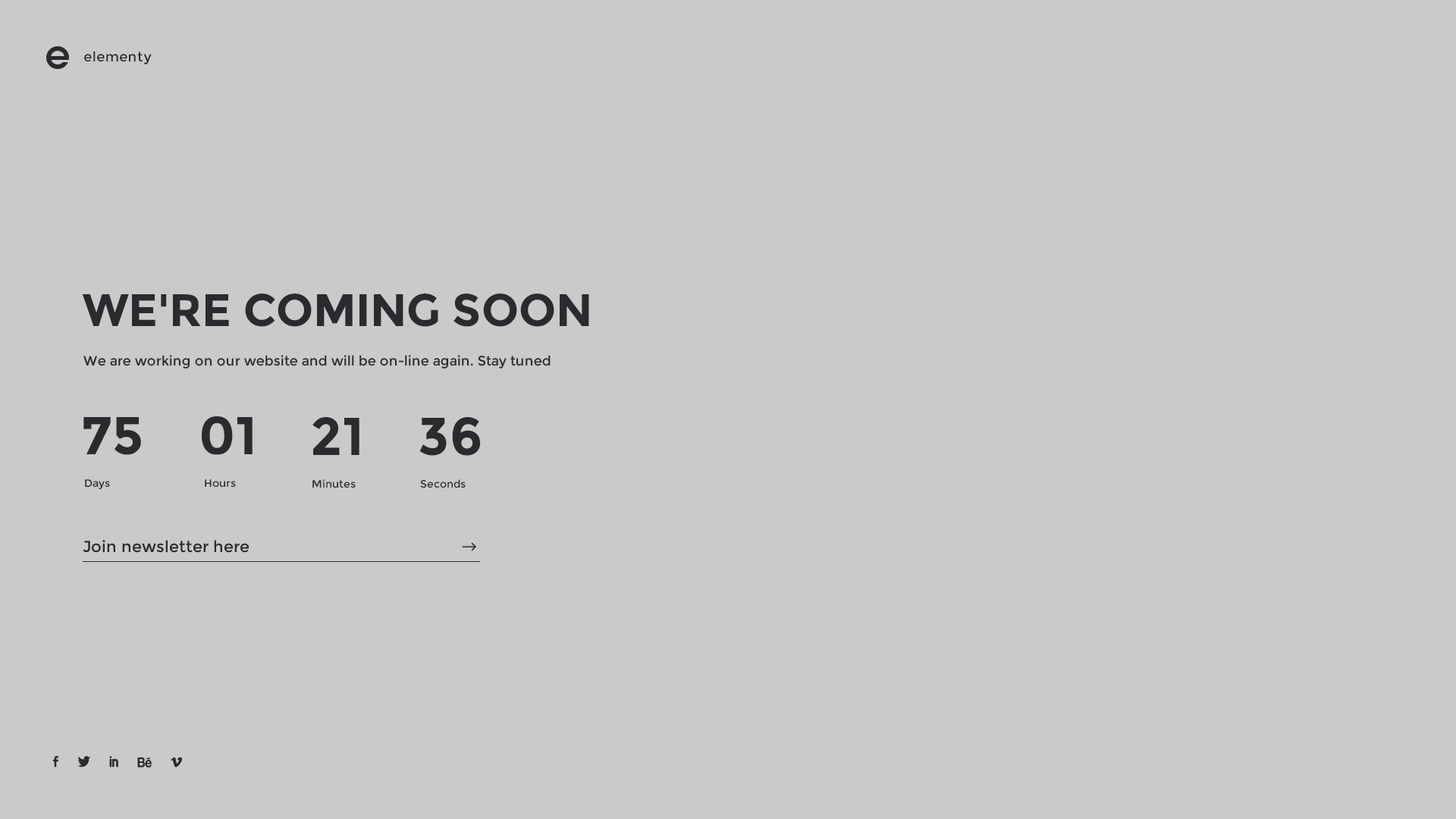
<style>
.page{position:relative;width:1456px;height:819px;background:#cacaca}
.page>*{position:absolute;margin:0}
.t1{font:13.6px "Montserrat-Regular";letter-spacing:0.025em;color:#2f2a2b}
.t2{font:45.5px "Montserrat-Bold";color:#2a2b2f}
.t3{font:13.6px "Montserrat-Regular";color:#2a2b2f}
.t4{font:53.1px "Montserrat-Bold";color:#2a2b2f;text-transform:uppercase}
.t5{font:10.6px "Montserrat-Regular";color:#2a2b2f}
.t6{font:15.9px "Montserrat-Regular";color:#2a2b2f}
</style>
<div class="page">
<p class="t1" style="left:84px;top:51px;width:68px;height:13px">elementy</p>
<p class="t2" style="left:82px;top:293px;width:507px;height:34px">WE'RE COMING SOON</p>
<p class="t3" style="left:83px;top:355px;width:468px;height:14px">We are working on our website and will be on-line again. Stay tuned</p>
<p class="t4" style="left:83px;top:417px;width:58px;height:38px">75</p>
<p class="t4" style="left:202px;top:416px;width:51px;height:39px">01</p>
<p class="t4" style="left:312px;top:417px;width:47px;height:38px">21</p>
<p class="t4" style="left:419px;top:417px;width:62px;height:39px">36</p>
<p class="t5" style="left:85px;top:479px;width:25px;height:10px">Days</p>
<p class="t5" style="left:205px;top:479px;width:31px;height:8px">Hours</p>
<p class="t5" style="left:312px;top:479px;width:44px;height:9px">Minutes</p>
<p class="t5" style="left:420px;top:479px;width:46px;height:9px">Seconds</p>
<p class="t6" style="left:83px;top:540px;width:166px;height:13px">Join newsletter here</p>
</div>
